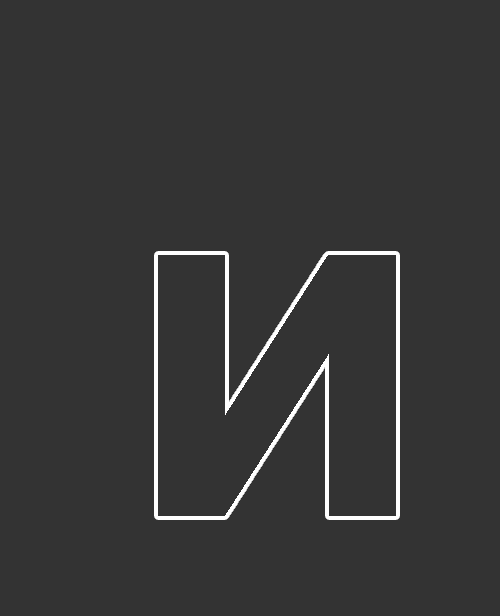
<style>
.page{position:relative;width:500px;height:616px;background:#333333}
.page>*{position:absolute;margin:0}
.t1{font:500px "Arial-BoldMT";color:#333333}
</style>
<div class="page">
<p class="t1" style="left:158px;top:255px;width:238px;height:261px">и</p>
</div>
